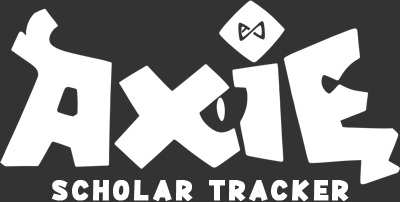
<style>
.page{position:relative;width:400px;height:202px;background:#333333}
.page>*{position:absolute;margin:0}
.t1{font:34.1px "Yokelvision";letter-spacing:0.1em;color:#ffffff;font-weight:bold}
</style>
<div class="page">
<p class="t1" style="left:52px;top:180px;width:297px;height:21px">SCHOLAR TRACKER</p>
</div>
